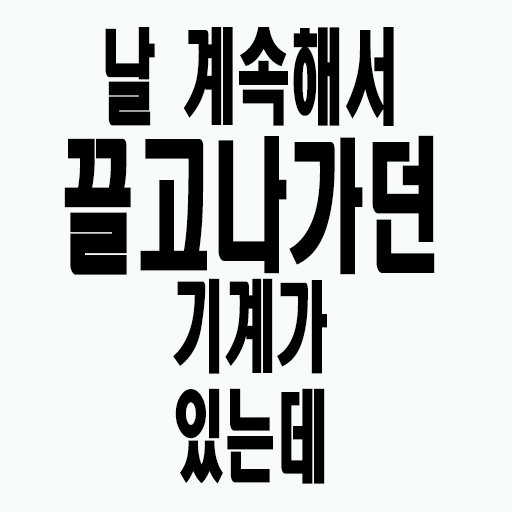
<style>
.page{position:relative;width:512px;height:512px;background:#f8fcf8}
.page>*{position:absolute;margin:0}
.t1{font:98.8px/110px "HeadlineR-HM";color:#000000;scale:0.53 1}
.t2{font:102.6px/125px "HeadlineR-HM";color:#000000;scale:0.53 1}
.t3{font:144.4px/125px "HeadlineR-HM";color:#000000;scale:0.53 1}
</style>
<div class="page">
<p class="t1" style="left:64px;top:27px;width:371px;height:457px;text-align:center"><span class="t2">날 계속해서<br></span><span class="t3">끌고나가던<br></span>기계가<br>있는데</p>
</div>
